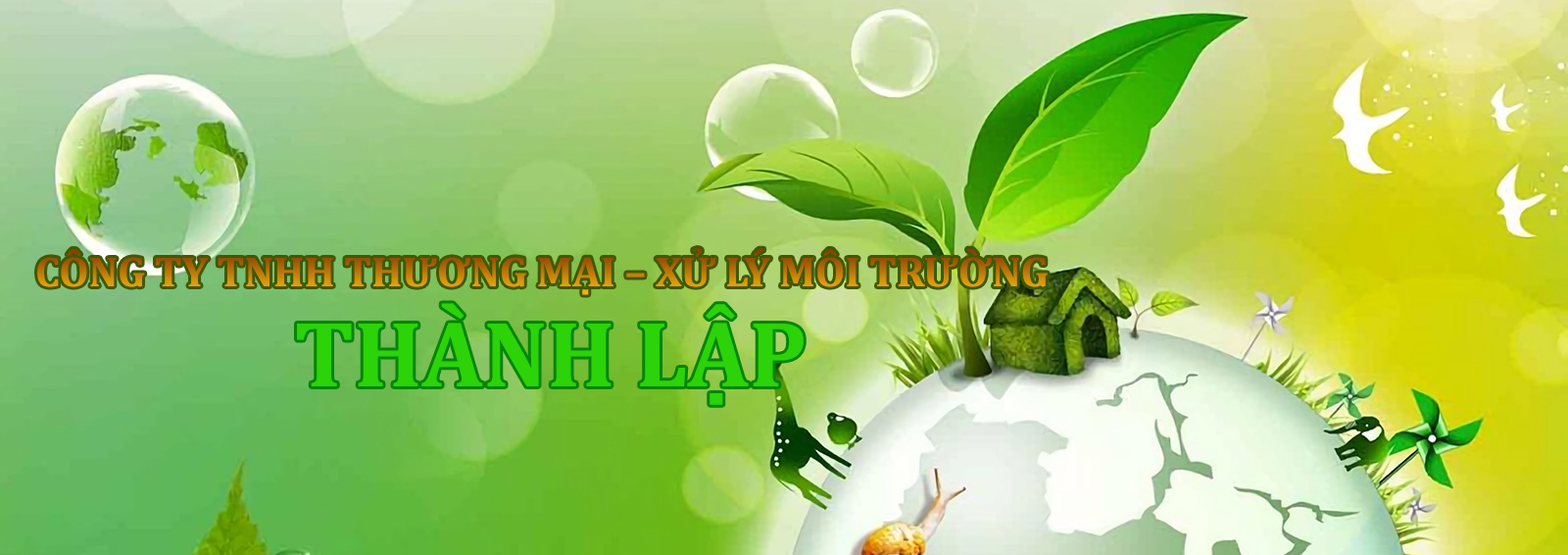
<style>
.page{position:relative;width:1568px;height:555px}
.page>*{position:absolute;margin:0}
.t1{font:42.6px "Cambria-Bold"}
.t2{font:94.1px "Cambria-Bold";color:#2cd308}
</style>
<div class="page">
<p class="t1" style="left:37px;top:248px;width:1011px;height:47px">CÔNG TY TNHH THƯƠNG MẠI – XỬ LÝ MÔI TRƯỜNG</p>
<p class="t2" style="left:297px;top:303px;width:507px;height:102px">THÀNH LẬP</p>
</div>
